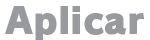
<style>
.page{position:relative;width:150px;height:40px;background:#ffffff}
.page>*{position:absolute;margin:0}
.t1{font:36px "RodinPro-UB";color:#989a9d}
</style>
<div class="page">
<p class="t1" style="left:5px;top:6px;width:140px;height:36px">Aplicar</p>
</div>
